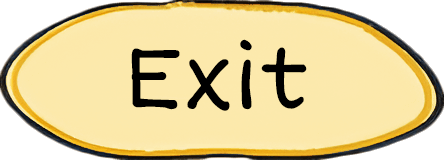
<style>
.page{position:relative;width:444px;height:160px}
.page>*{position:absolute;margin:0}
.t1{font:90px "ShortStack";color:#000000}
</style>
<div class="page">
<p class="t1" style="left:131px;top:39px;width:176px;height:72px">Exit</p>
</div>
